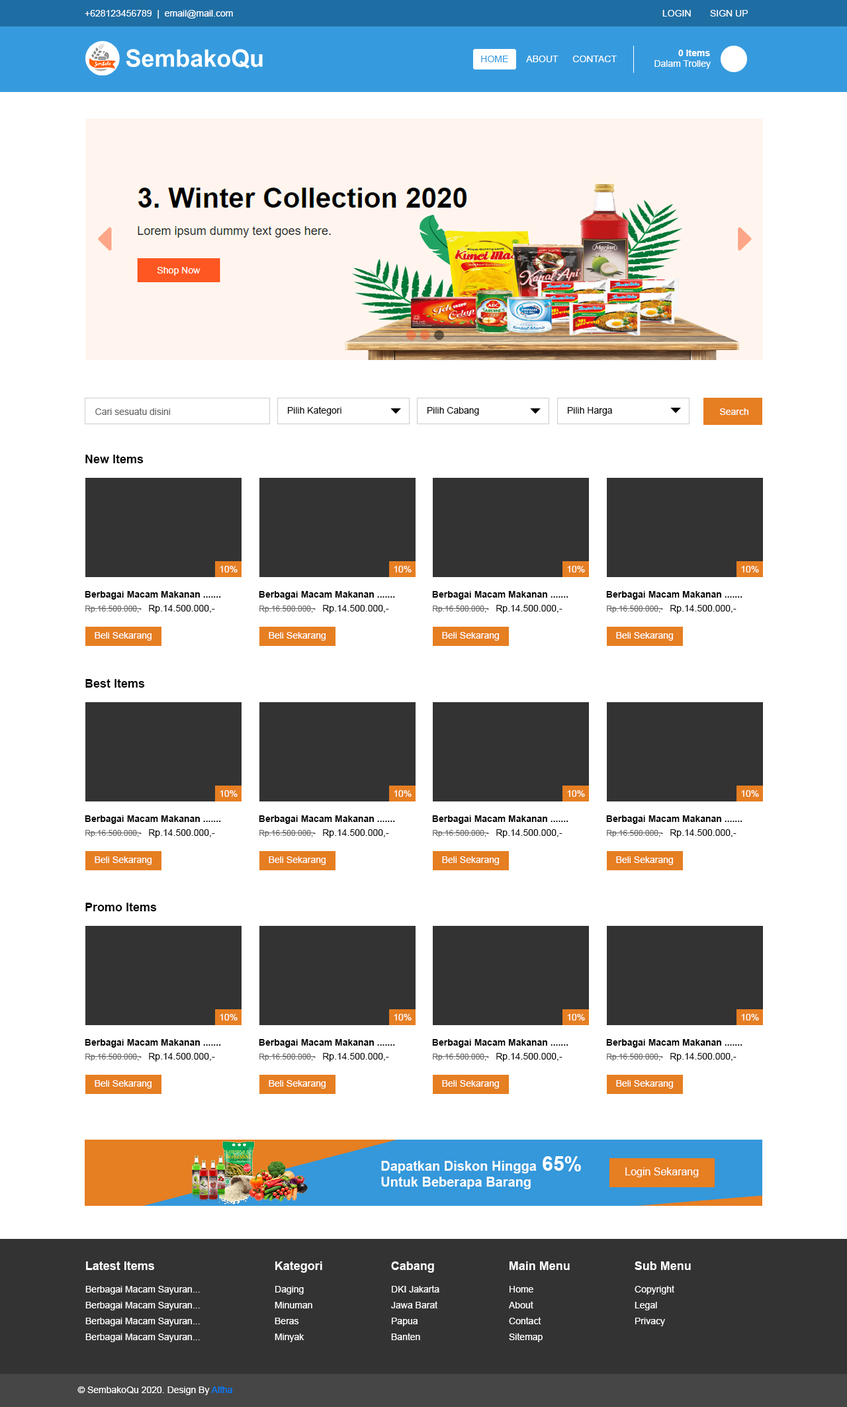
<style>
.page{position:relative;width:847px;height:1407px;background:#ffffff}
.page>*{position:absolute;margin:0}
.t1{font:9.3px "ArialMT";color:#ffffff}
.t2{font:9.3px "Arial-BoldMT";color:#ffffff}
.t3{font:9.3px "ArialMT";color:#369bde}
.t4{font:9.3px "ArialMT";color:#666666}
.t5{font:9.3px "ArialMT";color:#000000}
.t6{font:11.9px "Arial-BoldMT";color:#000000}
.t7{font:9.3px "Arial-BoldMT";color:#000000}
.t8{font:7.9px "ArialMT";color:#666666}
.t9{font:11.9px "Arial-BoldMT";color:#ffffff}
.t10{font:9.3px/15.9px "ArialMT";color:#ffffff}
.t11{font:9.3px "ArialMT";color:#007bff}
</style>
<div class="page">
<p class="t1" style="left:85px;top:10px;width:148px;height:9px">+628123456789  |  email@mail.com</p>
<p class="t1" style="left:663px;top:10px;width:28px;height:7px">LOGIN</p>
<p class="t1" style="left:710px;top:10px;width:38px;height:7px">SIGN UP</p>
<p class="t1" style="left:655px;top:50px;width:56px;height:19px;text-align:right"><span class="t2">0 Items<br></span>Dalam Trolley</p>
<p class="t3" style="left:481px;top:56px;width:27px;height:6px">HOME</p>
<p class="t1" style="left:526px;top:56px;width:33px;height:6px">ABOUT</p>
<p class="t1" style="left:573px;top:56px;width:44px;height:6px">CONTACT</p>
<p class="t4" style="left:95px;top:408px;width:75px;height:7px">Cari sesuatu disini</p>
<p class="t5" style="left:288px;top:406px;width:54px;height:10px">Pilih Kategori</p>
<p class="t5" style="left:428px;top:407px;width:51px;height:9px">Pilih Cabang</p>
<p class="t5" style="left:568px;top:407px;width:44px;height:9px">Pilih Harga</p>
<p class="t1" style="left:720px;top:408px;width:29px;height:7px">Search</p>
<p class="t6" style="left:85px;top:455px;width:59px;height:8px">New Items</p>
<p class="t1" style="left:220px;top:566px;width:18px;height:7px">10%</p>
<p class="t1" style="left:394px;top:566px;width:18px;height:7px">10%</p>
<p class="t1" style="left:567px;top:566px;width:18px;height:7px">10%</p>
<p class="t1" style="left:741px;top:566px;width:18px;height:7px">10%</p>
<p class="t7" style="left:85px;top:591px;width:136px;height:9px">Berbagai Macam Makanan .......</p>
<p class="t7" style="left:259px;top:591px;width:136px;height:9px">Berbagai Macam Makanan .......</p>
<p class="t7" style="left:432px;top:591px;width:137px;height:9px">Berbagai Macam Makanan .......</p>
<p class="t7" style="left:606px;top:591px;width:137px;height:9px">Berbagai Macam Makanan .......</p>
<p class="t8" style="left:85px;top:606px;width:57px;height:7px">Rp.16.500.000,-</p>
<p class="t5" style="left:149px;top:605px;width:66px;height:9px">Rp.14.500.000,-</p>
<p class="t8" style="left:259px;top:606px;width:57px;height:7px">Rp.16.500.000,-</p>
<p class="t5" style="left:323px;top:605px;width:66px;height:9px">Rp.14.500.000,-</p>
<p class="t8" style="left:433px;top:606px;width:56px;height:7px">Rp.16.500.000,-</p>
<p class="t5" style="left:496px;top:605px;width:67px;height:9px">Rp.14.500.000,-</p>
<p class="t8" style="left:607px;top:606px;width:56px;height:7px">Rp.16.500.000,-</p>
<p class="t5" style="left:671px;top:605px;width:66px;height:9px">Rp.14.500.000,-</p>
<p class="t1" style="left:95px;top:632px;width:57px;height:9px">Beli Sekarang</p>
<p class="t1" style="left:269px;top:632px;width:57px;height:9px">Beli Sekarang</p>
<p class="t1" style="left:442px;top:632px;width:57px;height:9px">Beli Sekarang</p>
<p class="t1" style="left:616px;top:632px;width:57px;height:9px">Beli Sekarang</p>
<p class="t6" style="left:85px;top:679px;width:60px;height:9px">Best Items</p>
<p class="t1" style="left:220px;top:790px;width:18px;height:7px">10%</p>
<p class="t1" style="left:394px;top:790px;width:18px;height:7px">10%</p>
<p class="t1" style="left:567px;top:790px;width:18px;height:7px">10%</p>
<p class="t1" style="left:741px;top:790px;width:18px;height:7px">10%</p>
<p class="t7" style="left:85px;top:816px;width:136px;height:8px">Berbagai Macam Makanan .......</p>
<p class="t7" style="left:259px;top:816px;width:136px;height:8px">Berbagai Macam Makanan .......</p>
<p class="t7" style="left:432px;top:816px;width:137px;height:8px">Berbagai Macam Makanan .......</p>
<p class="t7" style="left:606px;top:816px;width:137px;height:8px">Berbagai Macam Makanan .......</p>
<p class="t8" style="left:85px;top:830px;width:57px;height:7px">Rp.16.500.000,-</p>
<p class="t5" style="left:149px;top:829px;width:66px;height:9px">Rp.14.500.000,-</p>
<p class="t8" style="left:259px;top:830px;width:57px;height:7px">Rp.16.500.000,-</p>
<p class="t5" style="left:323px;top:829px;width:66px;height:9px">Rp.14.500.000,-</p>
<p class="t8" style="left:433px;top:830px;width:56px;height:7px">Rp.16.500.000,-</p>
<p class="t5" style="left:496px;top:829px;width:67px;height:9px">Rp.14.500.000,-</p>
<p class="t8" style="left:607px;top:830px;width:56px;height:7px">Rp.16.500.000,-</p>
<p class="t5" style="left:671px;top:829px;width:66px;height:9px">Rp.14.500.000,-</p>
<p class="t1" style="left:95px;top:857px;width:57px;height:8px">Beli Sekarang</p>
<p class="t1" style="left:269px;top:857px;width:57px;height:8px">Beli Sekarang</p>
<p class="t1" style="left:442px;top:857px;width:57px;height:8px">Beli Sekarang</p>
<p class="t1" style="left:616px;top:857px;width:57px;height:8px">Beli Sekarang</p>
<p class="t6" style="left:85px;top:903px;width:72px;height:9px">Promo Items</p>
<p class="t1" style="left:220px;top:1014px;width:18px;height:7px">10%</p>
<p class="t1" style="left:394px;top:1014px;width:18px;height:7px">10%</p>
<p class="t1" style="left:567px;top:1014px;width:18px;height:7px">10%</p>
<p class="t1" style="left:741px;top:1014px;width:18px;height:7px">10%</p>
<p class="t7" style="left:85px;top:1039px;width:136px;height:9px">Berbagai Macam Makanan .......</p>
<p class="t7" style="left:259px;top:1039px;width:136px;height:9px">Berbagai Macam Makanan .......</p>
<p class="t7" style="left:432px;top:1039px;width:137px;height:9px">Berbagai Macam Makanan .......</p>
<p class="t7" style="left:606px;top:1039px;width:137px;height:9px">Berbagai Macam Makanan .......</p>
<p class="t8" style="left:85px;top:1054px;width:57px;height:7px">Rp.16.500.000,-</p>
<p class="t5" style="left:149px;top:1053px;width:66px;height:9px">Rp.14.500.000,-</p>
<p class="t8" style="left:259px;top:1054px;width:57px;height:7px">Rp.16.500.000,-</p>
<p class="t5" style="left:323px;top:1053px;width:66px;height:9px">Rp.14.500.000,-</p>
<p class="t8" style="left:433px;top:1054px;width:56px;height:7px">Rp.16.500.000,-</p>
<p class="t5" style="left:496px;top:1053px;width:67px;height:9px">Rp.14.500.000,-</p>
<p class="t8" style="left:607px;top:1054px;width:56px;height:7px">Rp.16.500.000,-</p>
<p class="t5" style="left:671px;top:1053px;width:66px;height:9px">Rp.14.500.000,-</p>
<p class="t1" style="left:95px;top:1080px;width:57px;height:9px">Beli Sekarang</p>
<p class="t1" style="left:269px;top:1080px;width:57px;height:9px">Beli Sekarang</p>
<p class="t1" style="left:442px;top:1080px;width:57px;height:9px">Beli Sekarang</p>
<p class="t1" style="left:616px;top:1080px;width:57px;height:9px">Beli Sekarang</p>
<p class="t9" style="left:86px;top:1262px;width:68px;height:8px">Latest Items</p>
<p class="t9" style="left:275px;top:1262px;width:47px;height:11px">Kategori</p>
<p class="t9" style="left:391px;top:1262px;width:43px;height:11px">Cabang</p>
<p class="t9" style="left:510px;top:1262px;width:60px;height:8px">Main Menu</p>
<p class="t9" style="left:635px;top:1262px;width:56px;height:8px">Sub Menu</p>
<p class="t10" style="left:85px;top:1286px;width:115px;height:56px">Berbagai Macam Sayuran...<br>Berbagai Macam Sayuran...<br>Berbagai Macam Sayuran...<br>Berbagai Macam Sayuran...</p>
<p class="t10" style="left:275px;top:1286px;width:37px;height:56px">Daging<br>Minuman<br>Beras<br>Minyak</p>
<p class="t10" style="left:391px;top:1286px;width:49px;height:54px">DKI Jakarta<br>Jawa Barat<br>Papua<br>Banten</p>
<p class="t10" style="left:509px;top:1286px;width:34px;height:56px">Home<br>About<br>Contact<br>Sitemap</p>
<p class="t10" style="left:635px;top:1286px;width:40px;height:41px">Copyright<br>Legal<br>Privacy</p>
<p class="t1" style="left:77px;top:1387px;width:155px;height:8px">© SembakoQu 2020. Design By <span class="t11">Alfha</span></p>
</div>
